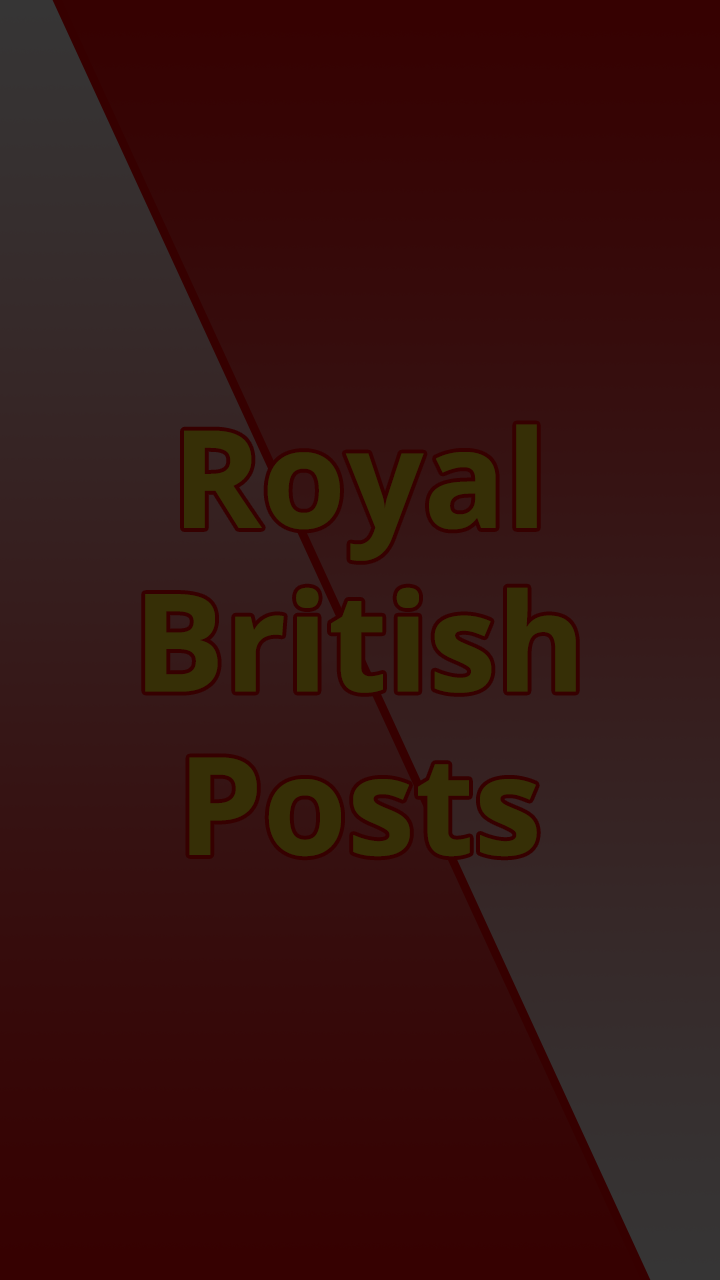
<style>
.page{position:relative;width:720px;height:1280px}
.page>*{position:absolute;margin:0}
.t1{font:136.2px "OpenSans-Bold";color:#362f06}
</style>
<div class="page">
<p class="t1" style="left:145px;top:424px;width:431px;height:433px;text-align:center">Royal<br>British<br>Posts</p>
</div>
